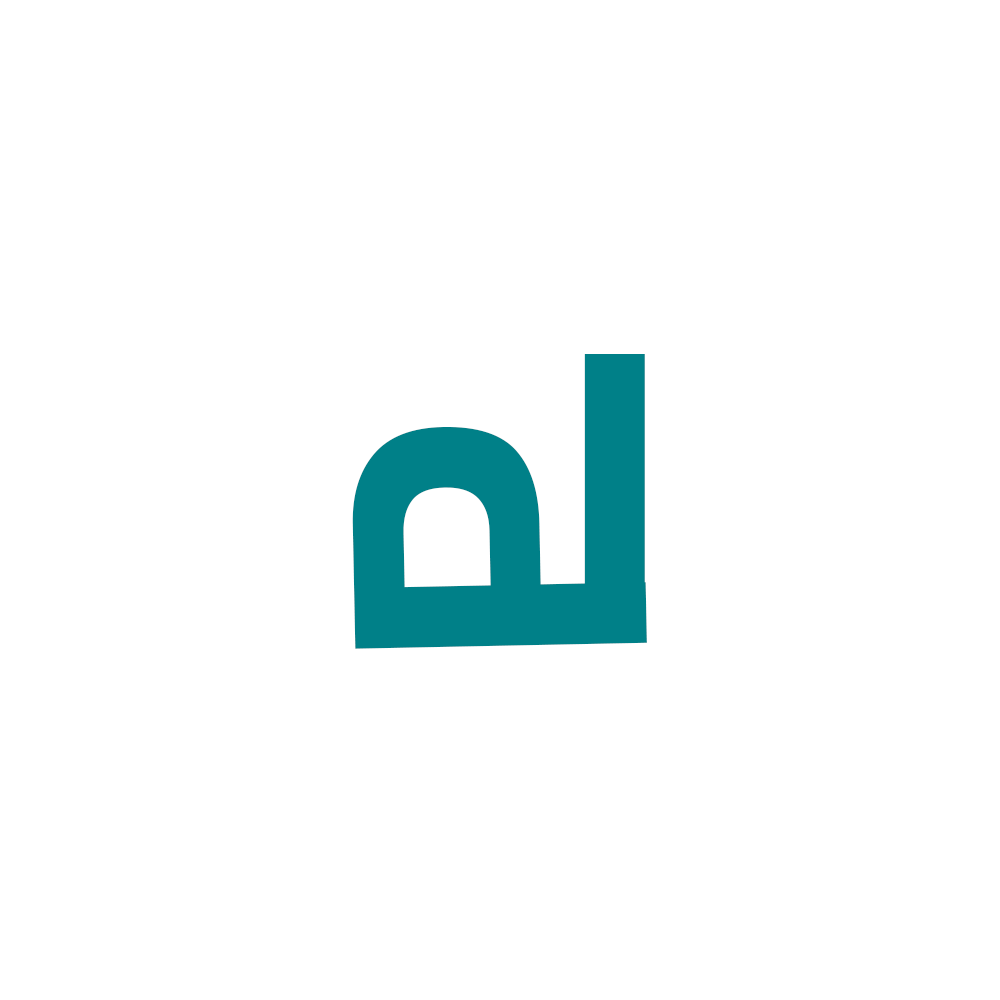
<style>
.page{position:relative;width:1000px;height:1000px;background:#ffffff}
.page>*{position:absolute;margin:0}
.t1{font:401.1px "Helvetica-Bold";color:#008088}
.t2{font:404.9px "Helvetica-Bold";color:#008088}
</style>
<div class="page">
<p class="t1" style="left:584px;top:354px;width:61px;height:288px">I</p>
<p class="t2" style="left:352px;top:427px;width:295px;height:222px;rotate:-91deg">P</p>
</div>
